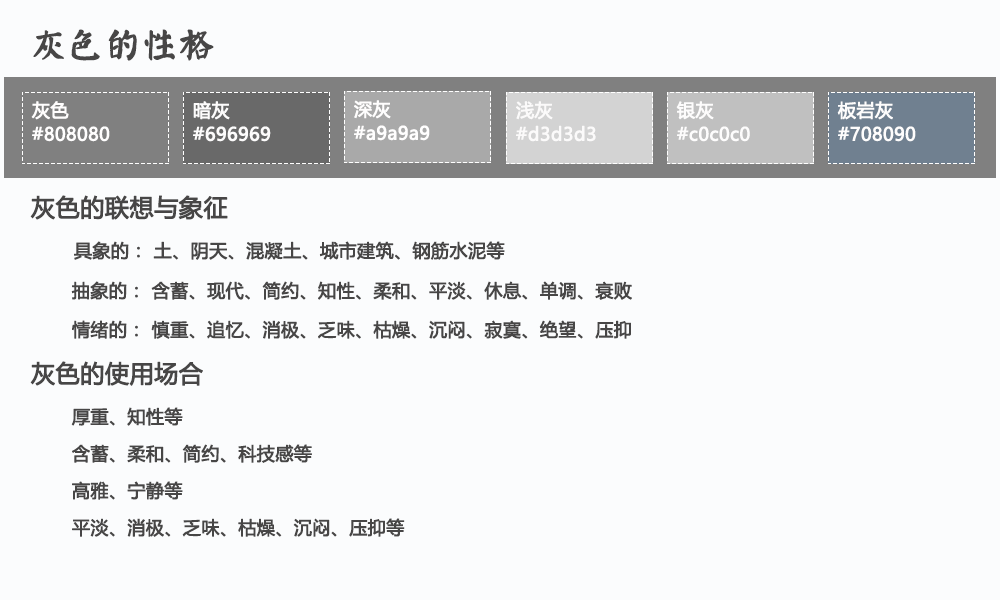
<style>
.page{position:relative;width:1000px;height:600px;background:#fbfcfd}
.page>*{position:absolute;margin:0}
.t1{font:36px "øów·»îów©I";color:#474646;font-weight:bold}
.t2{font:18px/24px "MicrosoftYaHei";color:#fffefe;font-weight:bold}
.t3{font:18px/24px "MicrosoftYaHei";color:#fdfcfc;font-weight:bold}
.t4{font:18px/24px "MicrosoftYaHei";color:#fbfafa;font-weight:bold}
.t5{font:18px/24px "MicrosoftYaHei";color:#fefdfd;font-weight:bold}
.t6{font:24px "MicrosoftYaHei";color:#474646;font-weight:bold}
.t7{font:18px "MicrosoftYaHei";color:#474646;font-weight:bold}
</style>
<div class="page">
<p class="t1" style="left:33px;top:29px;width:181px;height:32px">灰色的性格</p>
<p class="t2" style="left:31px;top:101px;width:79px;height:41px">灰色<br>#808080</p>
<p class="t3" style="left:193px;top:101px;width:78px;height:41px">暗灰<br>#696969</p>
<p class="t2" style="left:354px;top:100px;width:76px;height:41px">深灰<br>#a9a9a9</p>
<p class="t4" style="left:516px;top:101px;width:80px;height:41px">浅灰<br>#d3d3d3</p>
<p class="t3" style="left:676px;top:101px;width:74px;height:41px">银灰<br>#c0c0c0</p>
<p class="t5" style="left:837px;top:101px;width:79px;height:41px">板岩灰<br>#708090</p>
<p class="t6" style="left:30px;top:195px;width:198px;height:25px">灰色的联想与象征</p>
<p class="t7" style="left:74px;top:241px;width:431px;height:19px">具象的： 土、阴天、混凝土、城市建筑、钢筋水泥等</p>
<p class="t7" style="left:71px;top:281px;width:561px;height:19px">抽象的： 含蓄、现代、简约、知性、柔和、平淡、休息、单调、衰败</p>
<p class="t7" style="left:72px;top:320px;width:559px;height:19px">情绪的： 慎重、追忆、消极、乏味、枯燥、沉闷、寂寞、绝望、压抑</p>
<p class="t6" style="left:30px;top:361px;width:173px;height:25px">灰色的使用场合</p>
<p class="t7" style="left:71px;top:407px;width:112px;height:19px">厚重、知性等</p>
<p class="t7" style="left:72px;top:444px;width:240px;height:19px">含蓄、柔和、简约、科技感等</p>
<p class="t7" style="left:72px;top:481px;width:111px;height:19px">高雅、宁静等</p>
<p class="t7" style="left:72px;top:518px;width:333px;height:19px">平淡、消极、乏味、枯燥、沉闷、压抑等</p>
</div>
